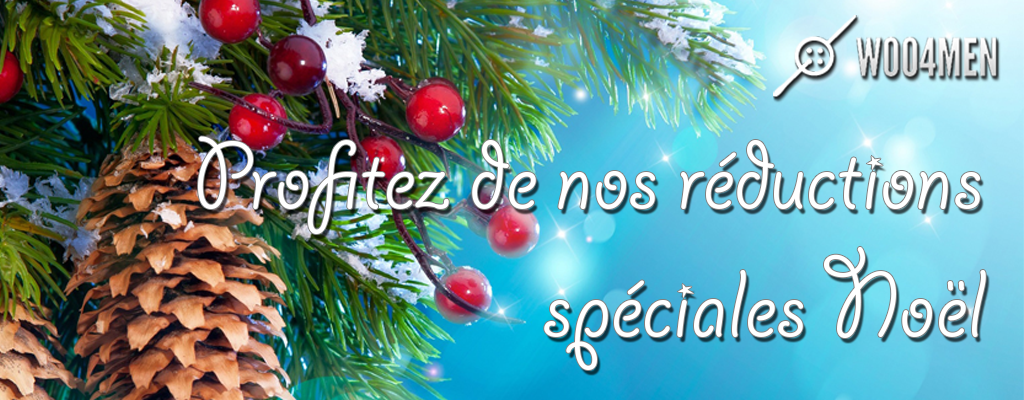
<style>
.page{position:relative;width:1024px;height:400px}
.page>*{position:absolute;margin:0}
.t1{font:106.7px "GiddyupStd";color:#ffffff}
</style>
<div class="page">
<p class="t1" style="left:198px;top:136px;width:788px;height:234px;text-align:right">Profitez de nos réductions<br>spéciales Noël</p>
</div>
